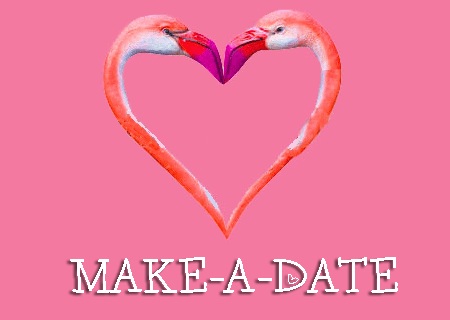
<style>
.page{position:relative;width:450px;height:320px;background:#f379a0}
.page>*{position:absolute;margin:0}
.t1{font:49px "LoveNessTwo";color:#ffffff}
</style>
<div class="page">
<p class="t1" style="left:70px;top:257px;width:328px;height:36px">MAKE-A-DATE</p>
</div>
